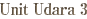
<style>
.page{position:relative;width:87px;height:19px;background:#ffffff}
.page>*{position:absolute;margin:0}
.t1{font:15.5px "RyuminPro-ExBold";letter-spacing:-0.04em}
</style>
<div class="page">
<p class="t1" style="left:0px;top:3px;width:88px;height:12px">Unit Udara 3</p>
</div>
